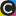
<style>
.page{position:relative;width:16px;height:16px;background:#222222}
.page>*{position:absolute;margin:0}
.t1{font:15px "Hero";color:#eeeeee}
</style>
<div class="page">
<p class="t1" style="left:3px;top:3px;width:10px;height:11px">C</p>
</div>
